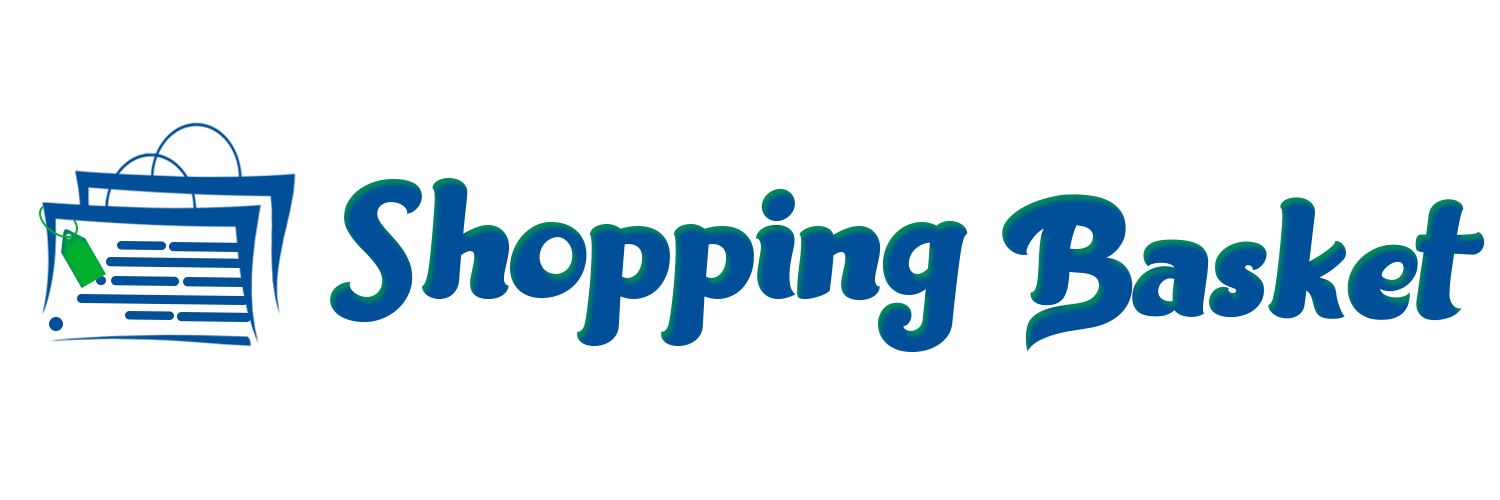
<style>
.page{position:relative;width:1500px;height:500px;background:#ffffff}
.page>*{position:absolute;margin:0}
.t1{font:172.8px "Bannie";color:#004f98}
</style>
<div class="page">
<p class="t1" style="left:330px;top:178px;width:638px;height:174px">Shopping</p>
<p class="t1" style="left:1002px;top:194px;width:483px;height:158px;rotate:1deg">Basket</p>
</div>
